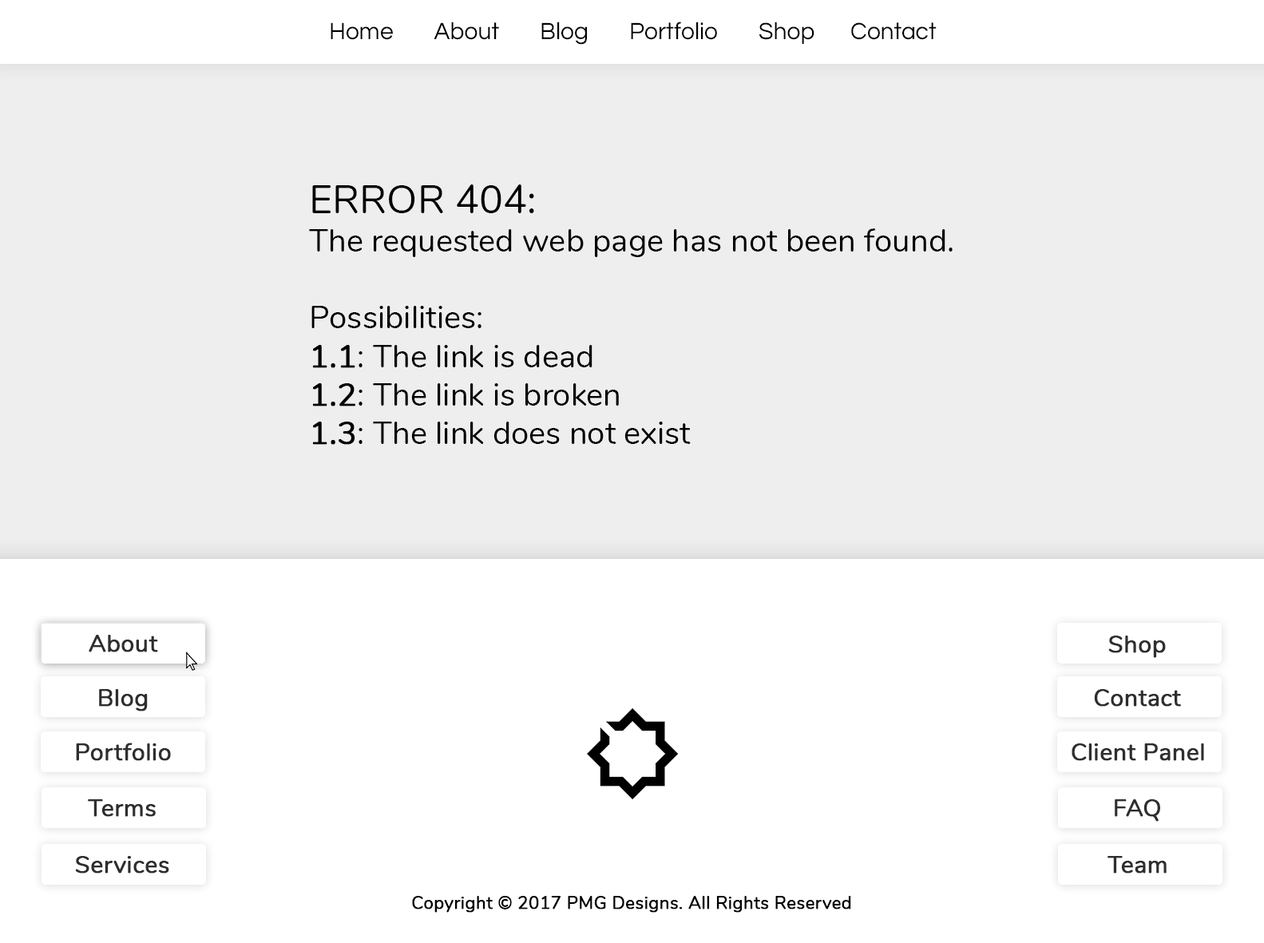
<style>
.page{position:relative;width:1264px;height:943px;background:#eeeeee}
.page>*{position:absolute;margin:0}
.t1{font:24.3px "Questrial-Regular";color:#000000}
.t2{font:32.1px "Nunito-Regular";color:#000000}
.t3{font:40.1px "Nunito-Regular";color:#000000}
.t4{font:32.1px "Nunito-Regular";color:#000000;font-weight:bold}
.t5{font:24px "Nunito-Regular";color:#2e2e2e;font-weight:bold}
.t6{font:17.7px "Nunito-Regular";color:#000000;font-weight:bold}
</style>
<div class="page">
<p class="t1" style="left:331px;top:22px;width:606px;height:23px">Home        About        Blog        Portfolio        Shop       Contact</p>
<p class="t2" style="left:309px;top:184px;width:644px;height:261px"><span class="t3">ERROR 404:<br></span>The requested web page has not been found.<br><br>Possibilities:<br><span class="t4">1.1</span>: The link is dead<br><span class="t4">1.2</span>: The link is broken<br><span class="t4">1.3</span>: The link does not exist</p>
<p class="t5" style="left:89px;top:635px;width:69px;height:17px">About</p>
<p class="t5" style="left:1109px;top:636px;width:57px;height:22px">Shop</p>
<p class="t5" style="left:99px;top:689px;width:49px;height:23px">Blog</p>
<p class="t5" style="left:1094px;top:689px;width:87px;height:18px">Contact</p>
<p class="t5" style="left:76px;top:743px;width:95px;height:18px">Portfolio</p>
<p class="t5" style="left:1072px;top:744px;width:132px;height:17px">Client Panel</p>
<p class="t5" style="left:88px;top:799px;width:68px;height:18px">Terms</p>
<p class="t5" style="left:1115px;top:799px;width:45px;height:23px">FAQ</p>
<p class="t5" style="left:75px;top:856px;width:94px;height:18px">Services</p>
<p class="t5" style="left:1108px;top:856px;width:59px;height:18px">Team</p>
<p class="t6" style="left:412px;top:896px;width:439px;height:17px">Copyright © 2017 PMG Designs. All Rights Reserved</p>
</div>
